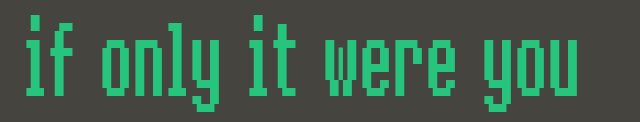
<style>
.page{position:relative;width:640px;height:122px;background:#46443f}
.page>*{position:absolute;margin:0}
.t1{font:86.4px "8bitoperatorRegular";letter-spacing:-0.05em;color:#26c47c;scale:0.54 1}
</style>
<div class="page">
<p class="t1" style="left:26px;top:15px;width:551px;height:97px">if only it were you</p>
</div>
